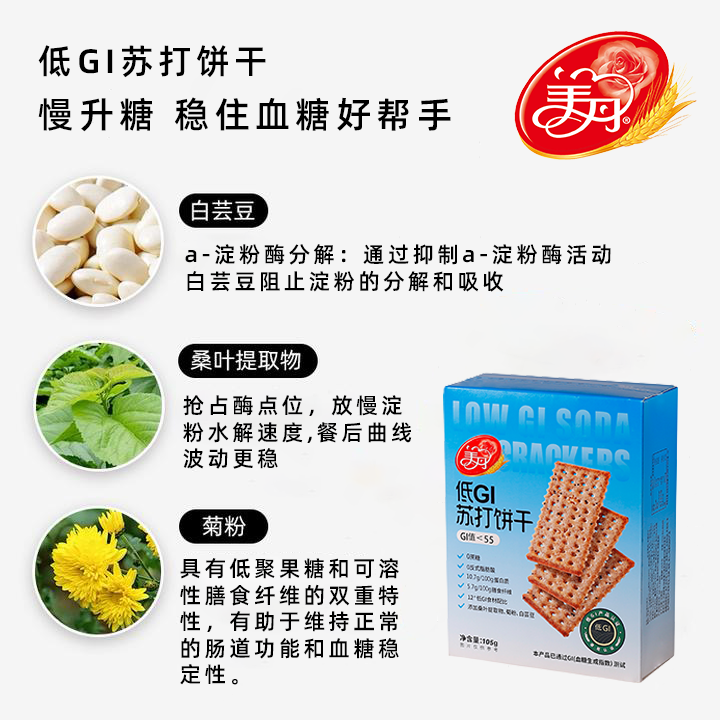
<style>
.page{position:relative;width:720px;height:720px;background:#f5f5f5}
.page>*{position:absolute;margin:0}
.t1{font:34px "AlibabaPuHuiTi-Medium";letter-spacing:0.14em;color:#000000}
.t2{font:36px "AlibabaPuHuiTi-Medium";letter-spacing:0.14em;color:#000000}
.t3{font:22.1px "AlibabaPuHuiTi-Medium";letter-spacing:0.14em;color:#000000}
</style>
<div class="page">
<p class="t1" style="left:38px;top:45px;width:228px;height:33px">低GI苏打饼干</p>
<p class="t2" style="left:38px;top:97px;width:413px;height:35px">慢升糖 稳住血糖好帮手</p>
<p class="t3" style="left:185px;top:244px;width:426px;height:48px">a-淀粉酶分解：通过抑制a-淀粉酶活动<br>白芸豆阻止淀粉的分解和吸收</p>
<p class="t3" style="left:183px;top:395px;width:229px;height:74px">抢占酶点位，放慢淀<br>粉水解速度,餐后曲线<br>波动更稳</p>
<p class="t3" style="left:180px;top:558px;width:219px;height:127px">具有低聚果糖和可溶<br>性膳食纤维的双重特<br>性，有助于维持正常<br>的肠道功能和血糖稳<br>定性。</p>
</div>
